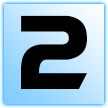
<style>
.page{position:relative;width:108px;height:108px;background:#000000}
.page>*{position:absolute;margin:0}
.t1{font:150px "ROBOTECHGP";color:#000000}
</style>
<div class="page">
<p class="t1" style="left:21px;top:15px;width:67px;height:74px">2</p>
</div>
